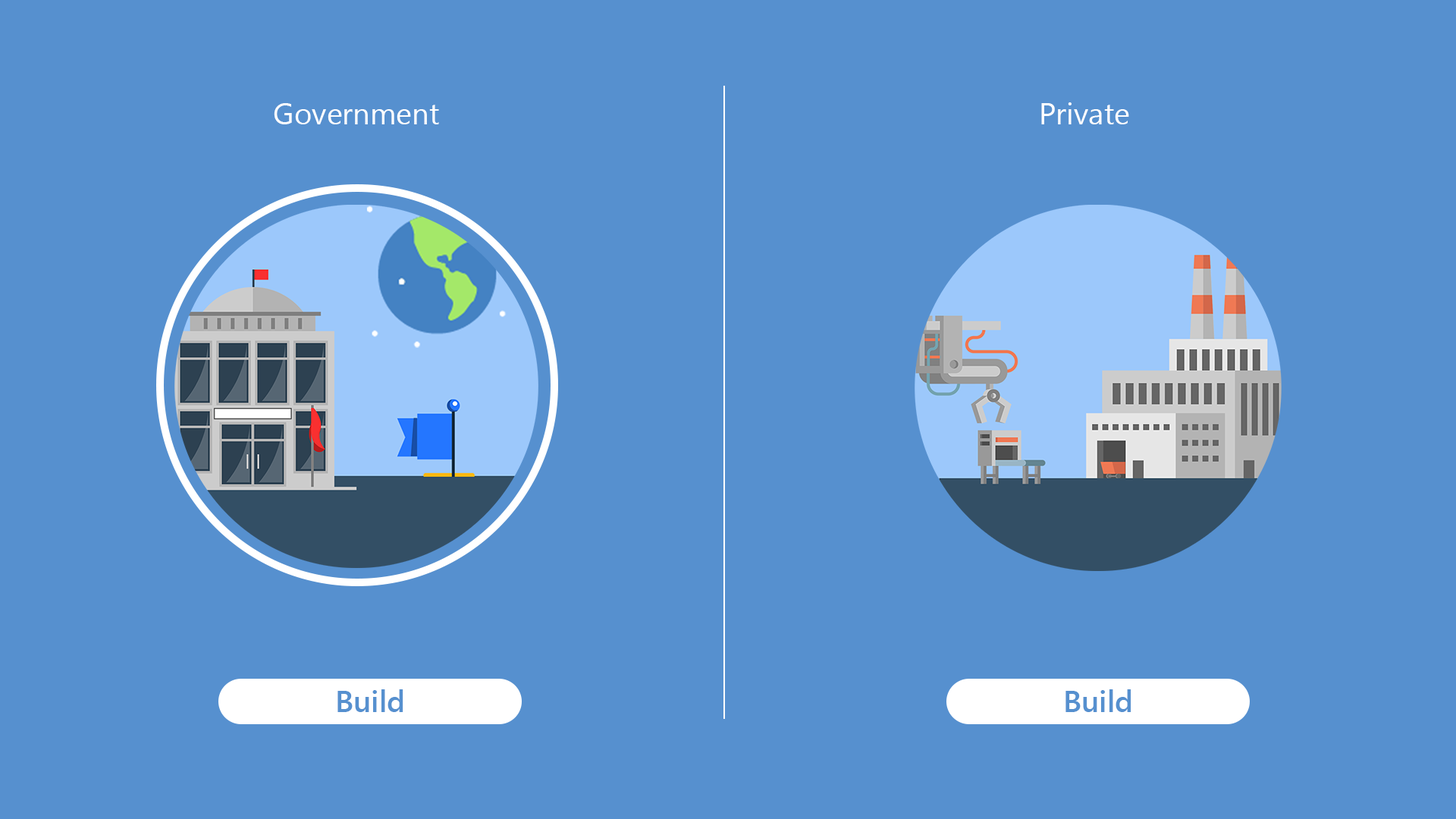
<style>
.page{position:relative;width:1456px;height:819px;background:#5690cf}
.page>*{position:absolute;margin:0}
.t1{font:30.3px "SegoeUI";color:#ffffff}
.t2{font:30.3px "SegoeUI-Semibold";color:#5690cf}
</style>
<div class="page">
<p class="t1" style="left:274px;top:103px;width:165px;height:21px">Government</p>
<p class="t1" style="left:1041px;top:102px;width:88px;height:22px">Private</p>
<p class="t2" style="left:337px;top:689px;width:66px;height:23px">Build</p>
<p class="t2" style="left:1065px;top:689px;width:66px;height:23px">Build</p>
</div>
